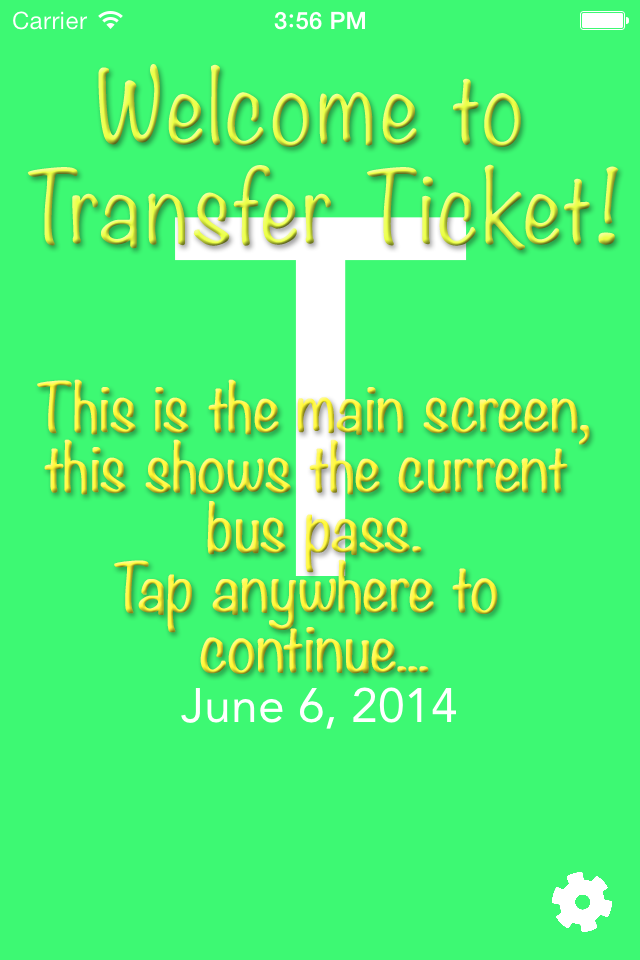
<style>
.page{position:relative;width:640px;height:960px;background:#3df973}
.page>*{position:absolute;margin:0}
.t1{font:60px/60px "Noteworthy-Light";letter-spacing:-0.01em;font-weight:bold}
</style>
<div class="page">
<p class="t1" style="left:37px;top:379px;width:553px;height:295px;text-align:center">This is the main screen,<br>this shows the current <br>bus pass.<br>Tap anywhere to <br>continue...</p>
</div>
